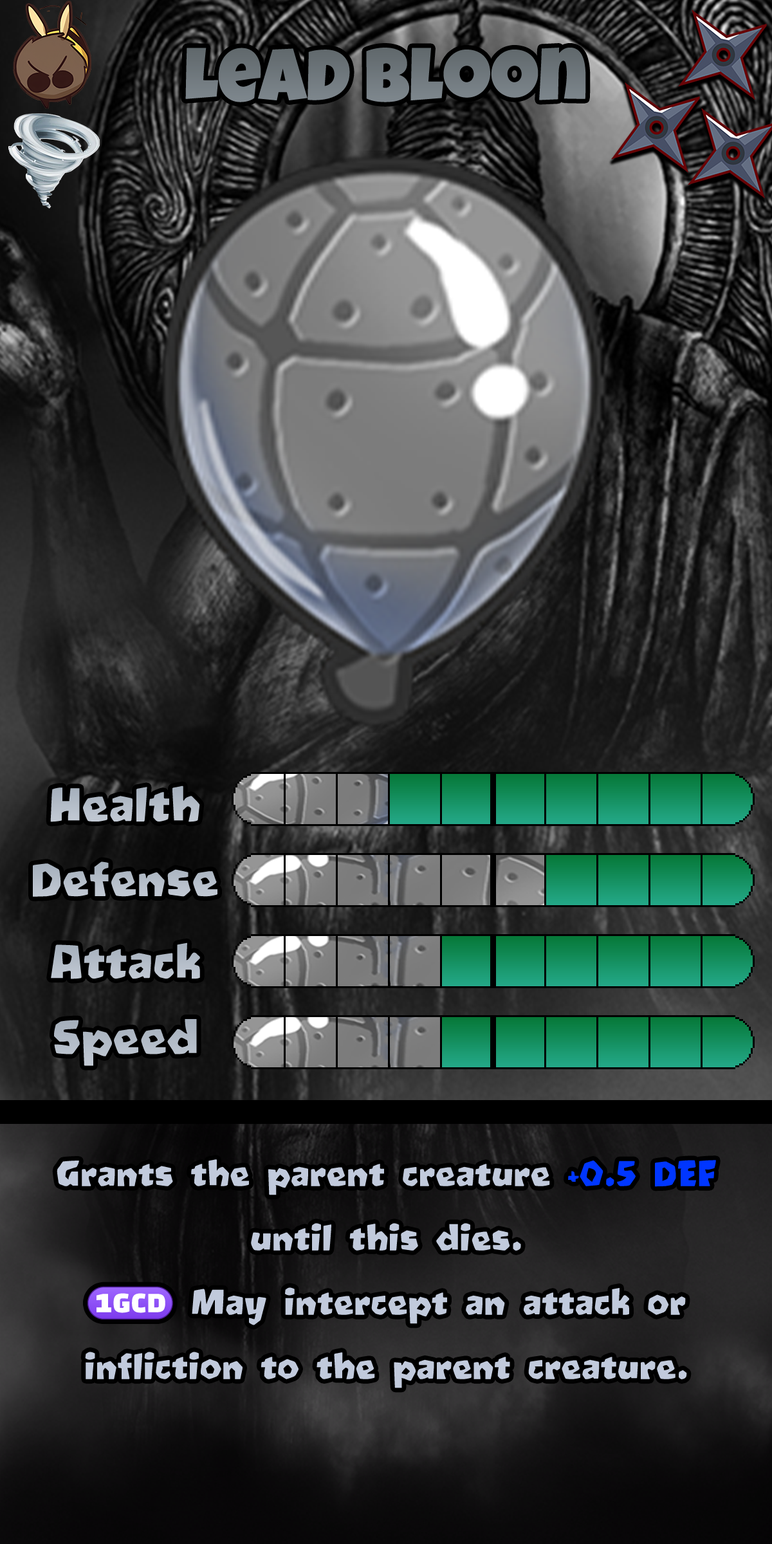
<style>
.page{position:relative;width:772px;height:1544px}
.page>*{position:absolute;margin:0}
.t1{font:128.7px "LuckiestGuy-Regular";color:#6f777c}
.t2{font:77.2px "Oetztype";color:#b5beca}
.t3{font:77.2px "Oetztype";color:#b7bfca}
.t4{font:77.2px "Oetztype";color:#b5bec9}
.t5{font:77.2px "Oetztype";color:#b2bbc7}
.t6{font:57.9px/64.3px "Oetztype";color:#c1cadc}
.t7{font:57.9px/64.3px "Oetztype";color:#0036ff}
.t8{font:57.9px/64.3px "stoogedings-Regular";color:#c1cadc}
</style>
<div class="page">
<p class="t1" style="left:185px;top:48px;width:401px;height:54px">Lead Bloon</p>
<p class="t2" style="left:50px;top:786px;width:150px;height:36px">Health</p>
<p class="t3" style="left:33px;top:862px;width:184px;height:35px">Defense</p>
<p class="t4" style="left:51px;top:943px;width:149px;height:36px">Attack</p>
<p class="t5" style="left:54px;top:1019px;width:143px;height:47px">Speed</p>
<p class="t6" style="left:57px;top:1160px;width:659px;height:229px;text-align:center">Grants the parent creature<span class="t7"> +0.5 DEF</span> until this dies.<br><span class="t8">(1GCD)</span> May intercept an attack or infliction to the parent creature.</p>
</div>
